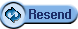
<style>
.page{position:relative;width:78px;height:29px;background:#ffffff}
.page>*{position:absolute;margin:0}
.t1{font:12px "Gulim";letter-spacing:0.025em;color:#1d2f6a}
</style>
<div class="page">
<p class="t1" style="left:29px;top:9px;width:41px;height:10px">Resend</p>
<p class="t1" style="left:30px;top:9px;width:41px;height:10px">Resend</p>
</div>
